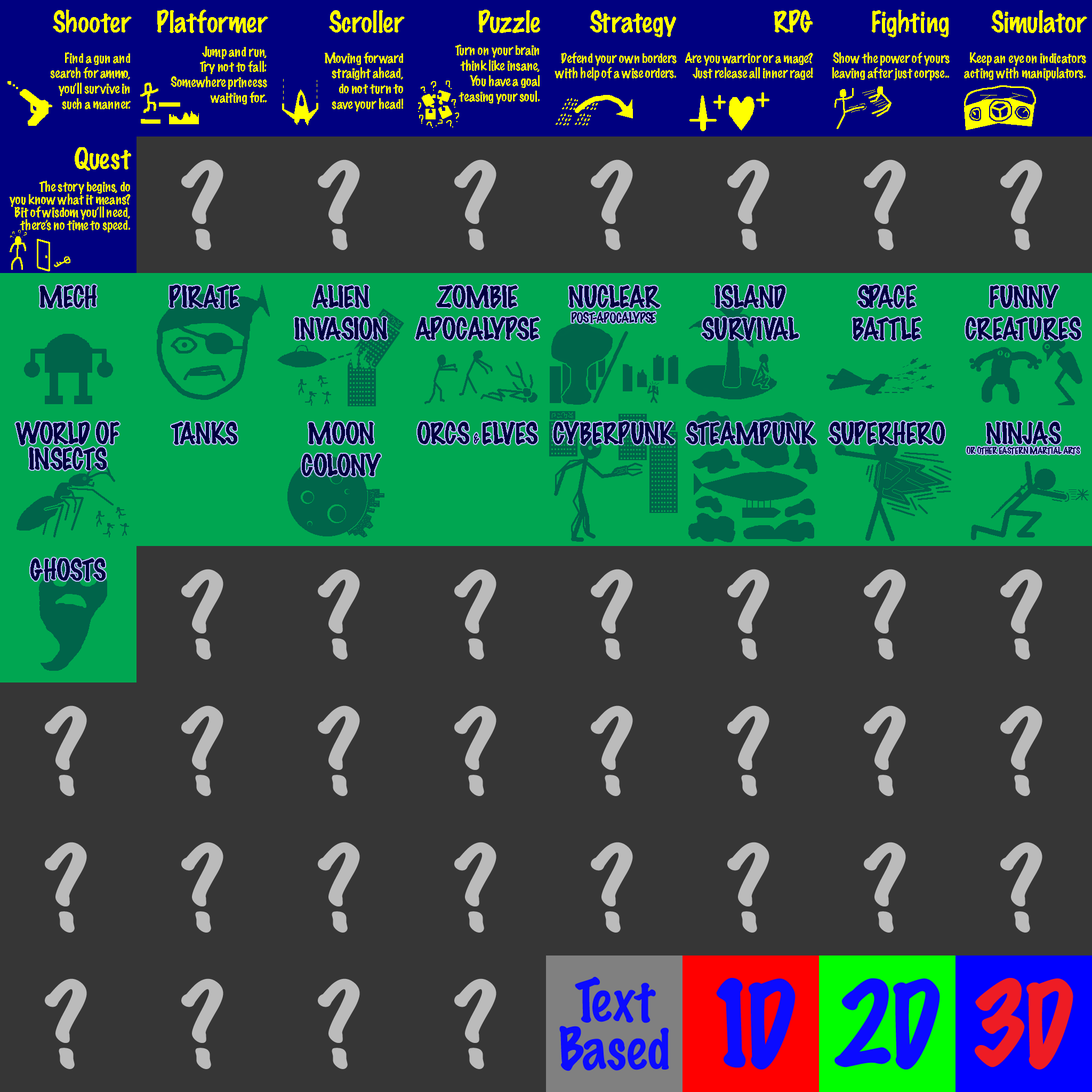
<style>
.page{position:relative;width:1092px;height:1092px;background:#363636}
.page>*{position:absolute;margin:0}
.t1{font:12.8px "MarkerFelt-Thin";letter-spacing:-0.04em;color:#ffff00}
.t2{font:26.7px "MarkerFelt-Thin";letter-spacing:-0.04em;color:#ffff00}
.t3{font:7.5px "MarkerFelt-Thin";letter-spacing:-0.04em;color:#ffff00}
.t4{font:12.8px "MarkerFelt-Thin";letter-spacing:-0.02em;color:#ffff00}
.t5{font:12.8px "MarkerFelt-Thin";letter-spacing:0.02em;color:#ffff00}
.t6{font:12.8px/12.8px "MarkerFelt-Thin";letter-spacing:-0.04em;color:#ffff00}
.t7{font:106.6px "MarkerFelt-Thin";letter-spacing:-0.04em;color:#bbbbbb}
.t8{font:26.7px "MarkerFelt-Thin";letter-spacing:-0.04em;color:#000040}
.t9{font:12.8px "MarkerFelt-Thin";letter-spacing:-0.04em;color:#000040}
.t10{font:26.7px/25.6px "MarkerFelt-Thin";letter-spacing:-0.04em;color:#000040}
.t11{font:13.3px "MarkerFelt-Thin";letter-spacing:-0.04em;color:#000040;scale:0.7 1}
.t12{font:8.5px "MarkerFelt-Thin";letter-spacing:-0.04em;color:#000040}
.t13{font:53.3px/48px "MarkerFelt-Thin";letter-spacing:-0.04em;color:#0b0bff}
.t14{font:106.6px "MarkerFelt-Thin";letter-spacing:-0.04em;color:#0b0bff}
.t15{font:106.6px "MarkerFelt-Thin";letter-spacing:-0.04em;color:#ee1c24}
</style>
<div class="page">
<p class="t1" style="left:50px;top:10px;width:82px;height:99px;text-align:right"><span class="t2">Shooter<br><br></span>Find a gun and<br>search for ammo,<br>you’ll survive in<br>such a manner.</p>
<p class="t1" style="left:157px;top:10px;width:111px;height:95px;text-align:right"><span class="t2">Platformer<br></span><span class="t3"> <br></span>Jump and run,<br>Try not to fall:<br>Somewhere princess<br>waiting for..</p>
<p class="t1" style="left:325px;top:10px;width:80px;height:101px;text-align:right"><span class="t2">Scroller<br></span><br>Moving forward<br>straight ahead,<br>do not turn to<br>save your head!</p>
<p class="t1" style="left:455px;top:10px;width:85px;height:94px;text-align:right"><span class="t2">Puzzle<br> <br></span>Turn on your brain<br>think like insane,<br>You have a goal<br>teasing your soul.</p>
<p class="t1" style="left:555px;top:10px;width:122px;height:71px;text-align:right"><span class="t2">Strategy<br></span><br>Defend your own borders<br>with help of a wise orders.</p>
<p class="t1" style="left:685px;top:10px;width:128px;height:70px;text-align:right"><span class="t2">RPG<br></span><br>Are y<span class="t4">o</span>u warr<span class="t5">i</span><span class="t4">o</span>r or a mage?<br>Just release all inner rage!</p>
<p class="t1" style="left:832px;top:10px;width:118px;height:71px;text-align:right"><span class="t2">Fighting<br></span><br>Show the power of yours<br>leaving after just corpse..</p>
<p class="t1" style="left:964px;top:10px;width:123px;height:71px;text-align:right"><span class="t2">Simulator<br></span><br>Keep an eye on indicators<br>acting with manipulators.</p>
<p class="t6" style="left:10px;top:147px;width:121px;height:85px;text-align:right"><span class="t2">Quest<br> <br></span><span class="t1">T</span>he story begins, do<br>you know what it means?<br>Bit of wisdom you’ll need,<br>there’s no time to speed.</p>
<p class="t7" style="left:181px;top:159px;width:42px;height:91px">?</p>
<p class="t7" style="left:318px;top:159px;width:42px;height:91px">?</p>
<p class="t7" style="left:454px;top:159px;width:42px;height:91px">?</p>
<p class="t7" style="left:591px;top:159px;width:42px;height:91px">?</p>
<p class="t7" style="left:727px;top:159px;width:42px;height:91px">?</p>
<p class="t7" style="left:864px;top:159px;width:42px;height:91px">?</p>
<p class="t7" style="left:1000px;top:159px;width:42px;height:91px">?</p>
<p class="t8" style="left:39px;top:285px;width:58px;height:23px">MECH</p>
<p class="t8" style="left:170px;top:285px;width:69px;height:23px">PIRATE</p>
<p class="t8" style="left:294px;top:285px;width:93px;height:55px;text-align:center">ALIEN<br>INVASION</p>
<p class="t8" style="left:415px;top:285px;width:125px;height:55px;text-align:center">ZOMBIE<br>APOCALYPSE</p>
<p class="t9" style="left:569px;top:285px;width:91px;height:38px;text-align:center"><span class="t8">NUCLEAR<br></span>POST-APOCALYPSE</p>
<p class="t8" style="left:702px;top:285px;width:97px;height:55px;text-align:center">ISLAND<br>SURVIVAL</p>
<p class="t8" style="left:853px;top:285px;width:68px;height:55px;text-align:center">SPACE<br>BATTLE</p>
<p class="t8" style="left:966px;top:285px;width:115px;height:55px;text-align:center">FUNNY<br>CREATURES</p>
<p class="t10" style="left:15px;top:421px;width:104px;height:49px;text-align:center">WORLD OF<br>INSECTS</p>
<p class="t8" style="left:171px;top:422px;width:66px;height:23px">TANKS</p>
<p class="t8" style="left:302px;top:422px;width:79px;height:54px;text-align:center">MOON<br>COLONY</p>
<p class="t8" style="left:417px;top:422px;width:120px;height:23px">ORCS <span class="t11">&amp; </span>ELVES</p>
<p class="t8" style="left:553px;top:421px;width:121px;height:24px">CYBERPUNK</p>
<p class="t8" style="left:686px;top:421px;width:130px;height:24px">STEAMPUNK</p>
<p class="t8" style="left:829px;top:421px;width:116px;height:24px">SUPERHERO</p>
<p class="t12" style="left:967px;top:422px;width:113px;height:32px;text-align:center"><span class="t8">NINJAS<br></span>OR OTHER EASTERN MARTIAL ARTS</p>
<p class="t8" style="left:30px;top:558px;width:76px;height:23px">GHOSTS</p>
<p class="t7" style="left:181px;top:569px;width:42px;height:91px">?</p>
<p class="t7" style="left:318px;top:569px;width:42px;height:91px">?</p>
<p class="t7" style="left:454px;top:569px;width:42px;height:91px">?</p>
<p class="t7" style="left:591px;top:569px;width:42px;height:91px">?</p>
<p class="t7" style="left:727px;top:569px;width:42px;height:91px">?</p>
<p class="t7" style="left:864px;top:569px;width:42px;height:91px">?</p>
<p class="t7" style="left:1000px;top:569px;width:42px;height:91px">?</p>
<p class="t7" style="left:45px;top:705px;width:42px;height:91px">?</p>
<p class="t7" style="left:181px;top:705px;width:42px;height:91px">?</p>
<p class="t7" style="left:318px;top:705px;width:42px;height:91px">?</p>
<p class="t7" style="left:454px;top:705px;width:42px;height:91px">?</p>
<p class="t7" style="left:591px;top:705px;width:42px;height:91px">?</p>
<p class="t7" style="left:727px;top:705px;width:42px;height:91px">?</p>
<p class="t7" style="left:864px;top:705px;width:42px;height:91px">?</p>
<p class="t7" style="left:1000px;top:705px;width:42px;height:91px">?</p>
<p class="t7" style="left:45px;top:842px;width:42px;height:91px">?</p>
<p class="t7" style="left:181px;top:842px;width:42px;height:91px">?</p>
<p class="t7" style="left:318px;top:842px;width:42px;height:91px">?</p>
<p class="t7" style="left:454px;top:842px;width:42px;height:91px">?</p>
<p class="t7" style="left:591px;top:842px;width:42px;height:91px">?</p>
<p class="t7" style="left:727px;top:842px;width:42px;height:91px">?</p>
<p class="t7" style="left:864px;top:842px;width:42px;height:91px">?</p>
<p class="t7" style="left:1000px;top:842px;width:42px;height:91px">?</p>
<p class="t13" style="left:559px;top:977px;width:110px;height:94px;text-align:center">Text<br>Based</p>
<p class="t14" style="left:716px;top:978px;width:80px;height:92px">1D</p>
<p class="t14" style="left:834px;top:978px;width:106px;height:92px">2D</p>
<p class="t15" style="left:975px;top:978px;width:98px;height:92px">3D</p>
<p class="t7" style="left:45px;top:978px;width:42px;height:91px">?</p>
<p class="t7" style="left:181px;top:978px;width:42px;height:91px">?</p>
<p class="t7" style="left:318px;top:978px;width:42px;height:91px">?</p>
<p class="t7" style="left:454px;top:978px;width:42px;height:91px">?</p>
</div>
